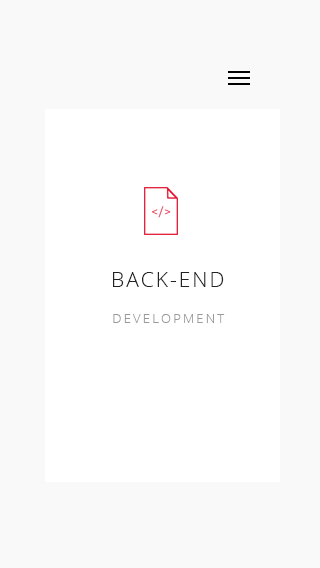
<style>
.page{position:relative;width:320px;height:568px;background:#f9f9f9}
.page>*{position:absolute;margin:0}
.t1{font:20.8px "OpenSans-Light";letter-spacing:0.1em;color:#222222}
.t2{font:12.5px "OpenSans-Light";letter-spacing:0.2em;color:#999999}
</style>
<div class="page">
<p class="t1" style="left:113px;top:272px;width:111px;height:15px">BACK-END</p>
<p class="t2" style="left:113px;top:314px;width:112px;height:9px">DEVELOPMENT</p>
</div>
